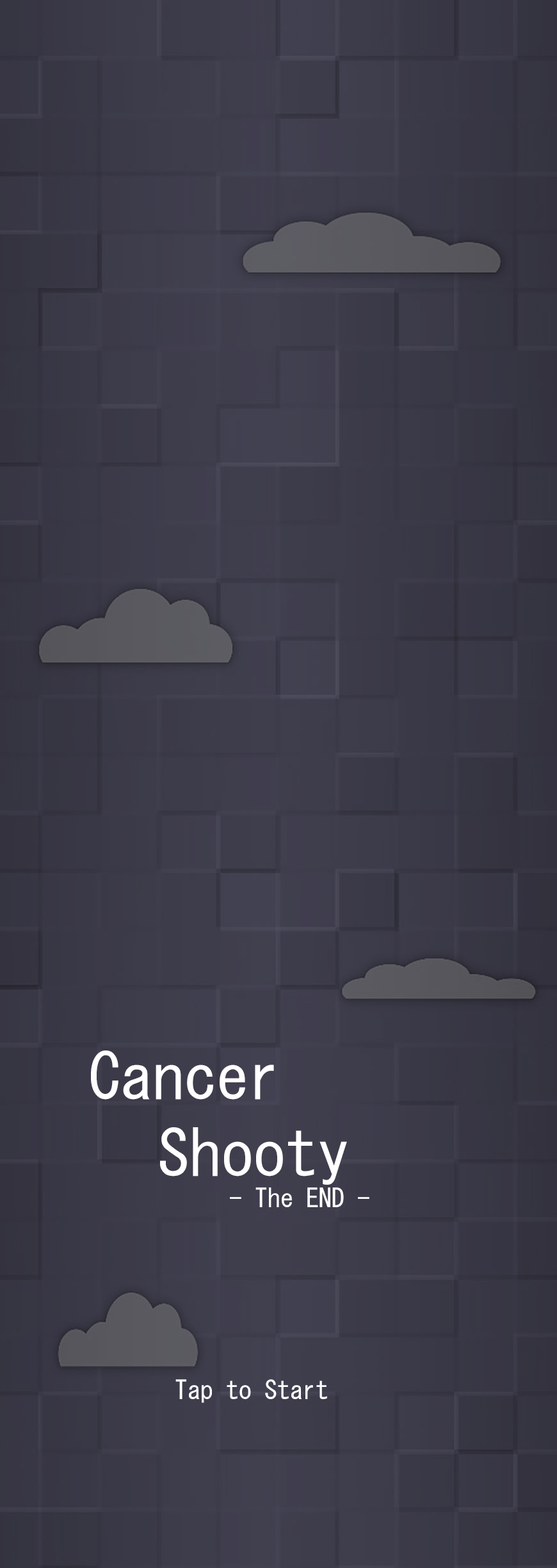
<style>
.page{position:relative;width:557px;height:1568px}
.page>*{position:absolute;margin:0}
.t1{font:64px "MS-Gothic";color:#ffffff}
.t2{font:25.6px "MS-Gothic";color:#ffffff}
</style>
<div class="page">
<p class="t1" style="left:91px;top:1050px;width:278px;height:157px">Cancer<br>   Shooty<br><span class="t2">           - The END -</span></p>
<p class="t2" style="left:175px;top:1379px;width:152px;height:24px">Tap to Start</p>
</div>
